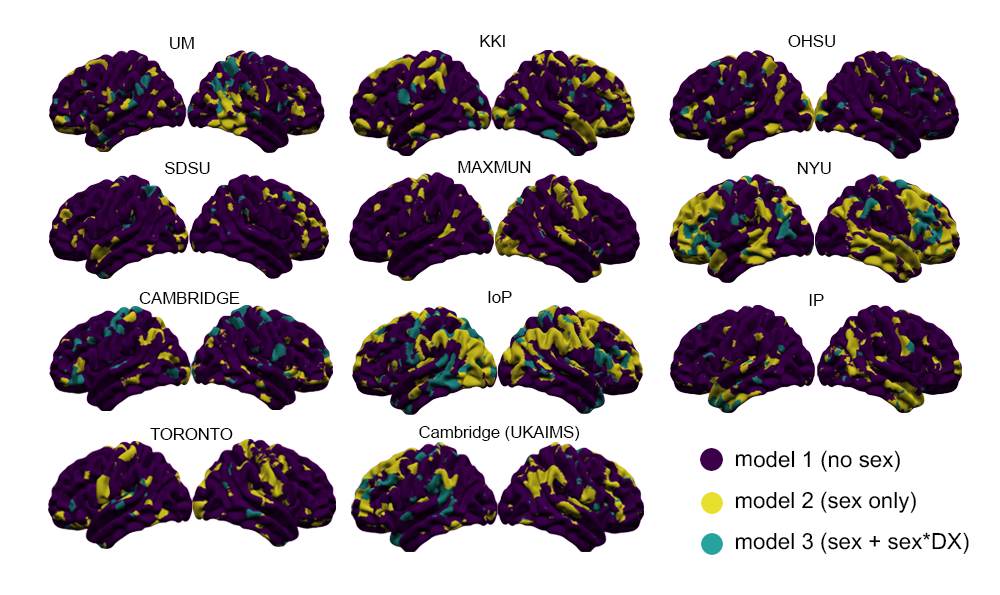
<style>
.page{position:relative;width:1000px;height:595px;background:#ffffff}
.page>*{position:absolute;margin:0}
.t1{font:16.7px "ArialMT";color:#000000}
.t2{font:22.3px "ArialMT";color:#000000}
</style>
<div class="page">
<p class="t1" style="left:170px;top:37px;width:24px;height:12px">UM</p>
<p class="t1" style="left:480px;top:35px;width:25px;height:12px">KKI</p>
<p class="t1" style="left:788px;top:35px;width:47px;height:12px">OHSU</p>
<p class="t1" style="left:458px;top:161px;width:73px;height:12px">MAXMUN</p>
<p class="t1" style="left:165px;top:162px;width:45px;height:12px">SDSU</p>
<p class="t1" style="left:797px;top:162px;width:34px;height:12px">NYU</p>
<p class="t1" style="left:139px;top:292px;width:101px;height:12px">CAMBRIDGE</p>
<p class="t1" style="left:488px;top:291px;width:24px;height:12px">IoP</p>
<p class="t1" style="left:809px;top:294px;width:15px;height:12px">IP</p>
<p class="t1" style="left:150px;top:428px;width:83px;height:12px">TORONTO</p>
<p class="t1" style="left:419px;top:426px;width:161px;height:15px">Cambridge (UKAIMS)</p>
<p class="t2" style="left:735px;top:450px;width:165px;height:22px">model 1 (no sex)</p>
<p class="t2" style="left:735px;top:491px;width:181px;height:22px">model 2 (sex only)</p>
<p class="t2" style="left:735px;top:532px;width:234px;height:22px">model 3 (sex + sex*DX)</p>
</div>
